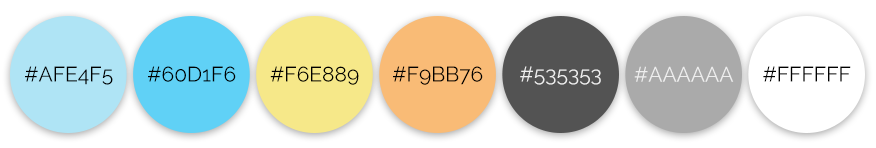
<style>
.page{position:relative;width:876px;height:148px;background:#ffffff}
.page>*{position:absolute;margin:0}
.t1{font:21px "Raleway-Regular";color:#000000}
.t2{font:21px "Raleway-Regular";color:#eeeeee}
</style>
<div class="page">
<p class="t1" style="left:25px;top:66px;width:88px;height:19px">#AFE4F5</p>
<p class="t1" style="left:148px;top:66px;width:88px;height:16px">#60D1F6</p>
<p class="t1" style="left:270px;top:66px;width:89px;height:19px">#F6E889</p>
<p class="t1" style="left:393px;top:66px;width:90px;height:19px">#F9BB76</p>
<p class="t2" style="left:520px;top:66px;width:81px;height:19px">#535353</p>
<p class="t2" style="left:634px;top:66px;width:100px;height:16px">#AAAAAA</p>
<p class="t1" style="left:763px;top:66px;width:88px;height:16px">#FFFFFF</p>
</div>
